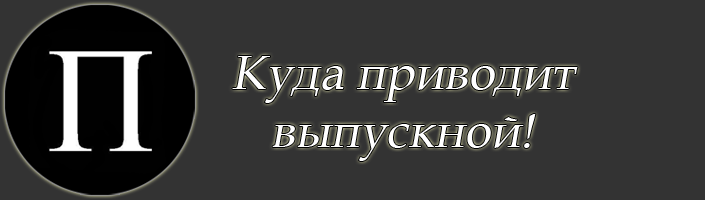
<style>
.page{position:relative;width:705px;height:200px;background:#333333}
.page>*{position:absolute;margin:0}
.t1{font:48px "BookAntiqua";color:#ffffff;font-style:italic}
</style>
<div class="page">
<p class="t1" style="left:232px;top:56px;width:346px;height:105px;text-align:center">Куда приводит <br>выпускной!</p>
</div>
